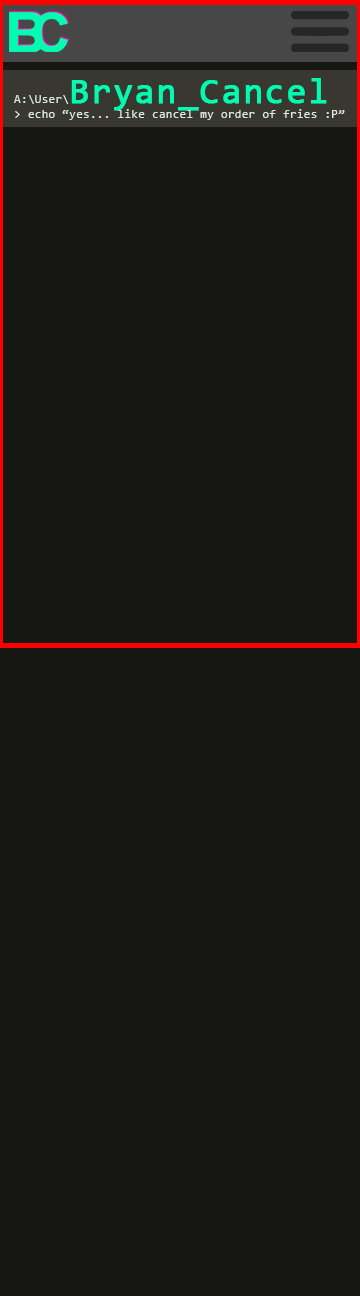
<style>
.page{position:relative;width:360px;height:1296px;background:#161713}
.page>*{position:absolute;margin:0}
.t1{font:12px "Consolas";letter-spacing:0.025em;color:#dce9de}
.t2{font:36px "Consolas";letter-spacing:0.025em;color:#00fbb1;font-weight:bold}
</style>
<div class="page">
<p class="t1" style="left:14px;top:78px;width:331px;height:42px">A:\User\<span class="t2">Bryan_Cancel<br></span>&gt; echo “yes... like cancel my order of fries :P”</p>
</div>
